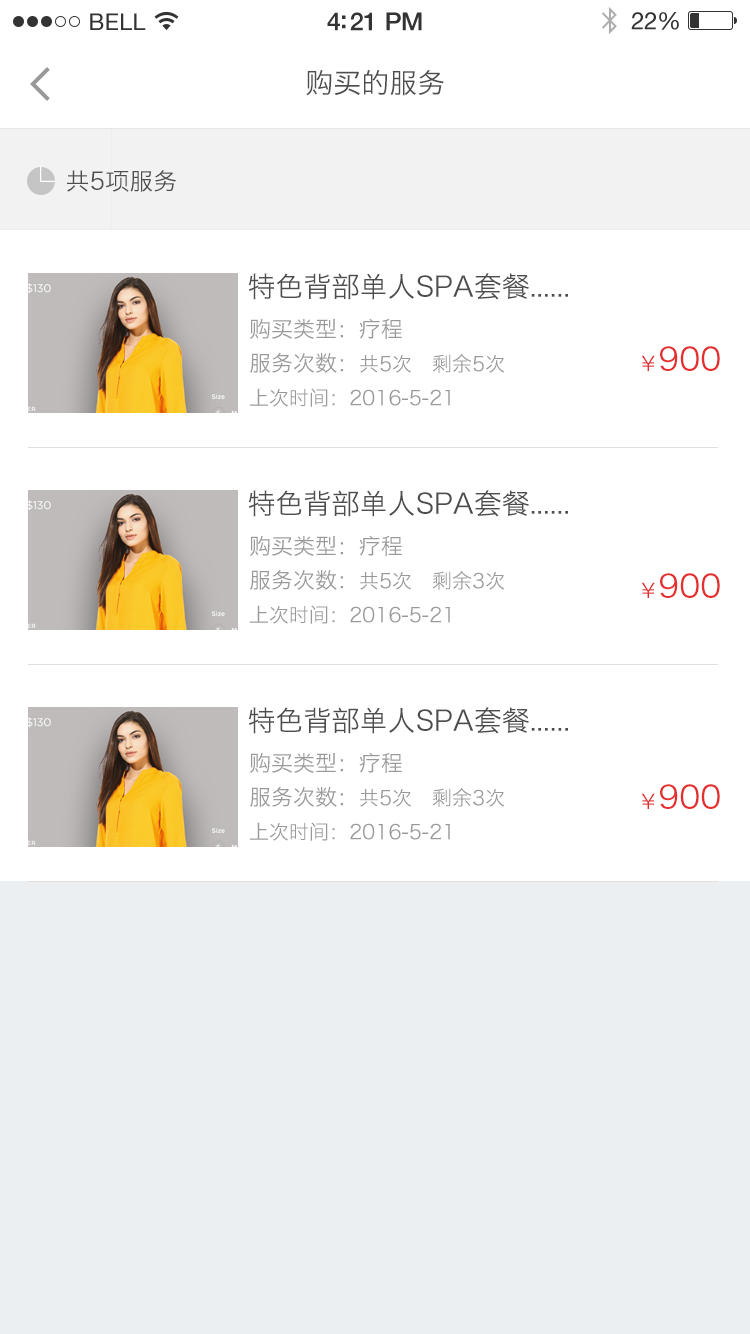
<style>
.page{position:relative;width:750px;height:1334px;background:#ffffff}
.page>*{position:absolute;margin:0}
.t1{font:28px "HiraginoSansGB-W3";color:#4d4d4d}
.t2{font:24px "HiraginoSansGB-W3";color:#4d4d4d}
.t3{font:20px/34px "HiraginoSansGB-W3";color:#999999}
.t4{font:22px/34px "HiraginoSansGB-W3";color:#999999}
.t5{font:32px "HiraginoSansGB-W3";color:#e42f2f}
.t6{font:20px "HiraginoSansGB-W3";color:#999999}
.t7{font:20px "HiraginoSansGB-W3";color:#e42f2f}
</style>
<div class="page">
<p class="t1" style="left:306px;top:70px;width:138px;height:26px">购买的服务</p>
<p class="t2" style="left:67px;top:170px;width:109px;height:22px">共5项服务</p>
<p class="t1" style="left:248px;top:273px;width:320px;height:27px">特色背部单人SPA套餐......</p>
<p class="t3" style="left:249px;top:318px;width:256px;height:89px;text-align:justify"><span class="t4">购买类型：疗程<br>服务次数：</span>共5次   剩余5次<br>上次时间：2016-5-21</p>
<p class="t5" style="left:641px;top:346px;width:79px;height:25px"><span class="t6">                                        </span><span class="t7">￥</span>900</p>
<p class="t1" style="left:248px;top:490px;width:320px;height:27px">特色背部单人SPA套餐......</p>
<p class="t3" style="left:249px;top:535px;width:256px;height:89px;text-align:justify"><span class="t4">购买类型：疗程<br>服务次数：</span>共5次   剩余3次<br>上次时间：2016-5-21</p>
<p class="t5" style="left:641px;top:573px;width:79px;height:25px"><span class="t6">                                        </span><span class="t7">￥</span>900</p>
<p class="t1" style="left:248px;top:707px;width:320px;height:27px">特色背部单人SPA套餐......</p>
<p class="t3" style="left:249px;top:752px;width:256px;height:89px;text-align:justify"><span class="t4">购买类型：疗程<br>服务次数：</span>共5次   剩余3次<br>上次时间：2016-5-21</p>
<p class="t5" style="left:641px;top:784px;width:79px;height:25px"><span class="t6">                                        </span><span class="t7">￥</span>900</p>
</div>
